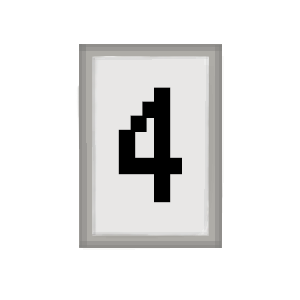
<style>
.page{position:relative;width:300px;height:300px;background:#ffffff}
.page>*{position:absolute;margin:0}
.t1{font:150px "Small Fonts";color:#000000;font-weight:bold}
</style>
<div class="page">
<p class="t1" style="left:118px;top:87px;width:64px;height:116px">4</p>
</div>
